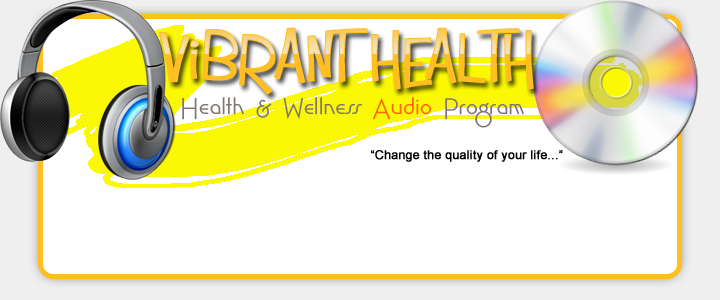
<style>
.page{position:relative;width:720px;height:300px;background:#ffffff}
.page>*{position:absolute;margin:0}
.t1{font:70px "MisterSirloinBTNRare";letter-spacing:0.01em;color:#ffbe22;font-weight:bold}
.t2{font:30px "SalsaMangosBTNLt";letter-spacing:0.01em;color:#807772}
.t3{font:30px "SalsaMangosBTNLt";letter-spacing:0.01em;color:#fe6601}
.t4{font:12px "ArialMT";letter-spacing:0.01em;color:#000000;font-weight:bold}
</style>
<div class="page">
<p class="t1" style="left:159px;top:27px;width:375px;height:68px">Vibrant Health</p>
<p class="t2" style="left:182px;top:97px;width:342px;height:31px">Health &amp; Wellness <span class="t3">Audio</span> Program</p>
<p class="t4" style="left:371px;top:150px;width:192px;height:12px">“Change the quality of your life...”</p>
</div>
